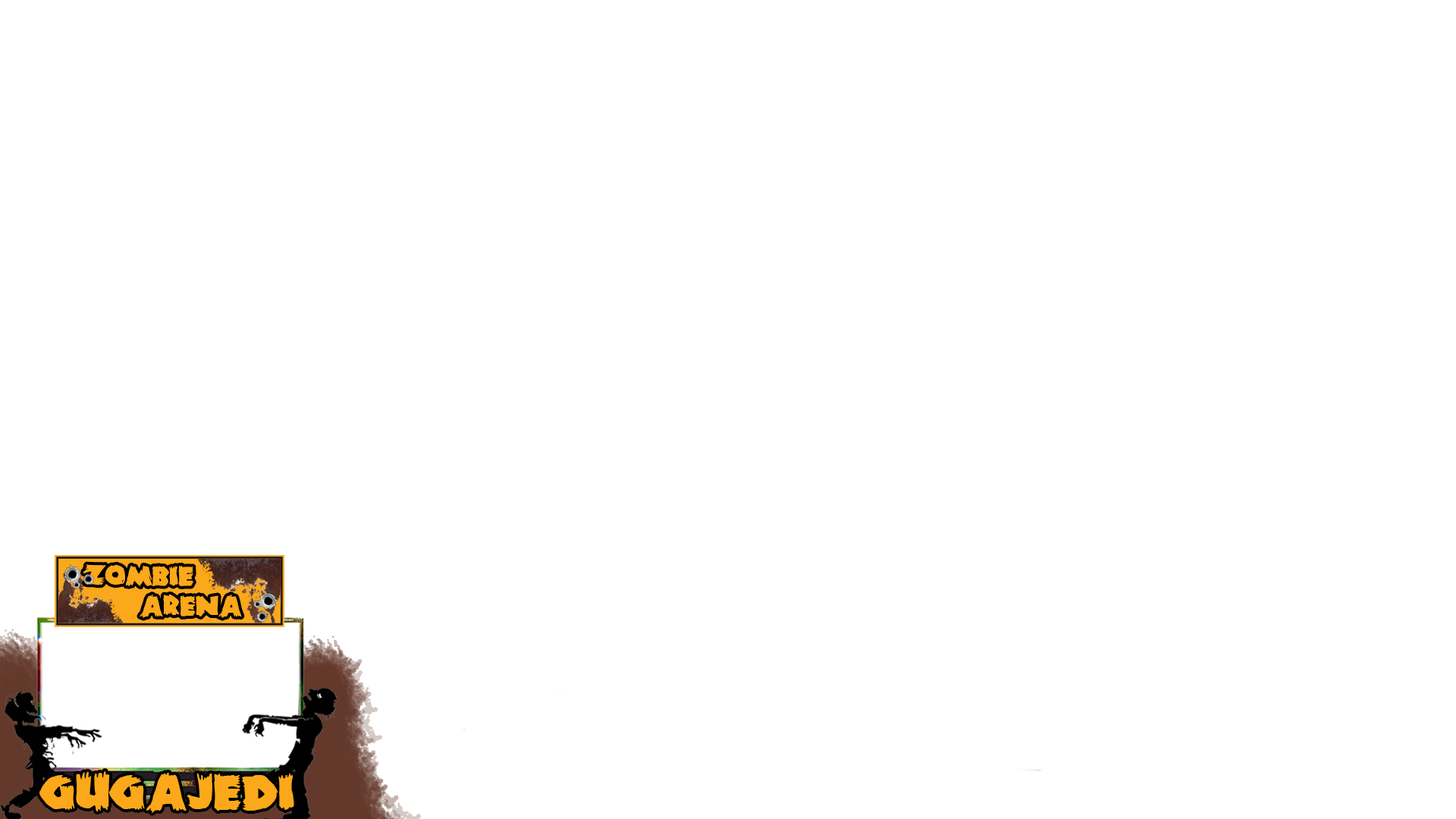
<style>
.page{position:relative;width:1456px;height:819px;background:#ffffff}
.page>*{position:absolute;margin:0}
.t1{font:31.8px "ZombieA";color:#fba81a}
.t2{font:32.3px "ZombieA";color:#fba81a}
.t3{font:56.9px "ZombieA";color:#fba81a}
</style>
<div class="page">
<p class="t1" style="left:83px;top:564px;width:110px;height:23px">ZOMBIE</p>
<p class="t2" style="left:140px;top:595px;width:102px;height:23px">ARENA</p>
<p class="t3" style="left:39px;top:771px;width:255px;height:42px">GugaJEDI</p>
</div>
